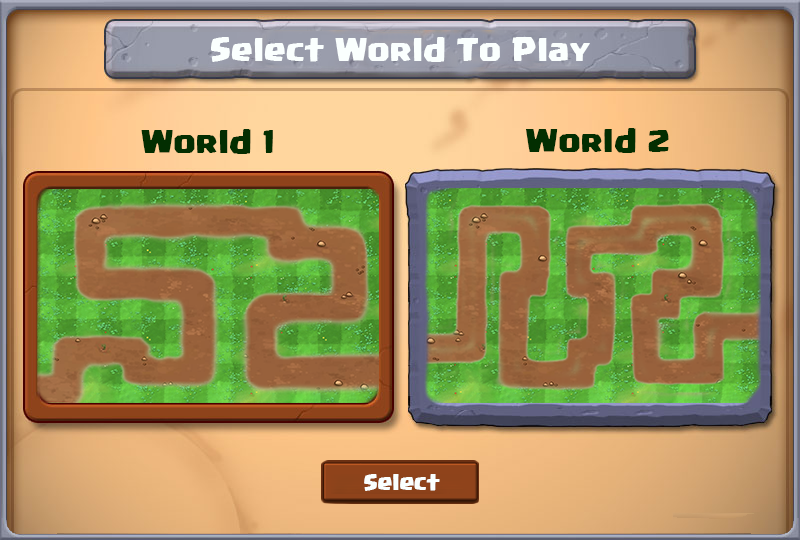
<style>
.page{position:relative;width:800px;height:540px}
.page>*{position:absolute;margin:0}
.t1{font:25px "Supercell-Magic";color:#fafffe}
.t2{font:25px "Supercell-Magic";color:#032e01}
.t3{font:23.3px "Supercell-Magic";color:#032e01;scale:1.26 1}
</style>
<div class="page">
<p class="t1" style="left:211px;top:37px;width:379px;height:25px">Select World To Play</p>
<p class="t2" style="left:141px;top:129px;width:132px;height:25px">World 1</p>
<p class="t2" style="left:526px;top:128px;width:143px;height:25px">World <span class="t3">2</span></p>
</div>
